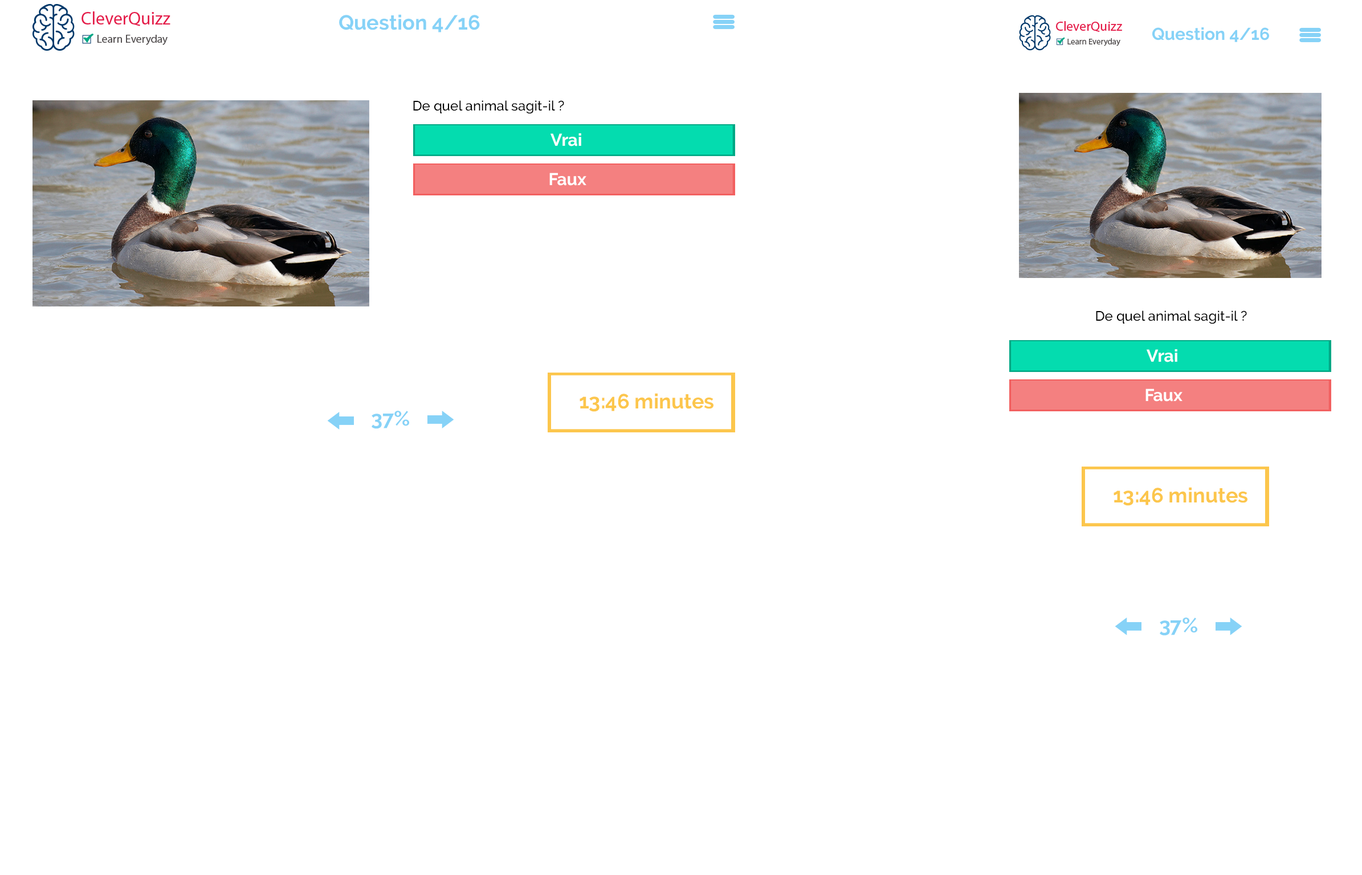
<style>
.page{position:relative;width:1362px;height:875px;background:#ffffff}
.page>*{position:absolute;margin:0}
.t1{font:20.5px "Raleway-Bold";color:#86d2f7}
.t2{font:17.1px "Raleway-Bold";color:#86d2f7}
.t3{font:13.7px "Raleway-Medium";color:#000000}
.t4{font:17.1px "Raleway-Bold";color:#ffffff}
.t5{font:20.5px "Raleway-Bold";color:#fcc64c}
</style>
<div class="page">
<p class="t1" style="left:339px;top:14px;width:141px;height:18px">Question 4/16</p>
<p class="t2" style="left:1152px;top:27px;width:117px;height:15px">Question 4/16</p>
<p class="t3" style="left:413px;top:100px;width:151px;height:14px">De quel animal sagit-il ?</p>
<p class="t4" style="left:551px;top:133px;width:30px;height:13px">Vrai</p>
<p class="t4" style="left:549px;top:173px;width:37px;height:13px">Faux</p>
<p class="t3" style="left:1096px;top:311px;width:151px;height:13px">De quel animal sagit-il ?</p>
<p class="t4" style="left:1147px;top:349px;width:30px;height:13px">Vrai</p>
<p class="t4" style="left:1146px;top:389px;width:37px;height:13px">Faux</p>
<p class="t5" style="left:580px;top:393px;width:134px;height:19px">13:46 minutes</p>
<p class="t1" style="left:372px;top:411px;width:37px;height:18px">37%</p>
<p class="t5" style="left:1114px;top:487px;width:134px;height:19px">13:46 minutes</p>
<p class="t1" style="left:1160px;top:618px;width:37px;height:18px">37%</p>
</div>
